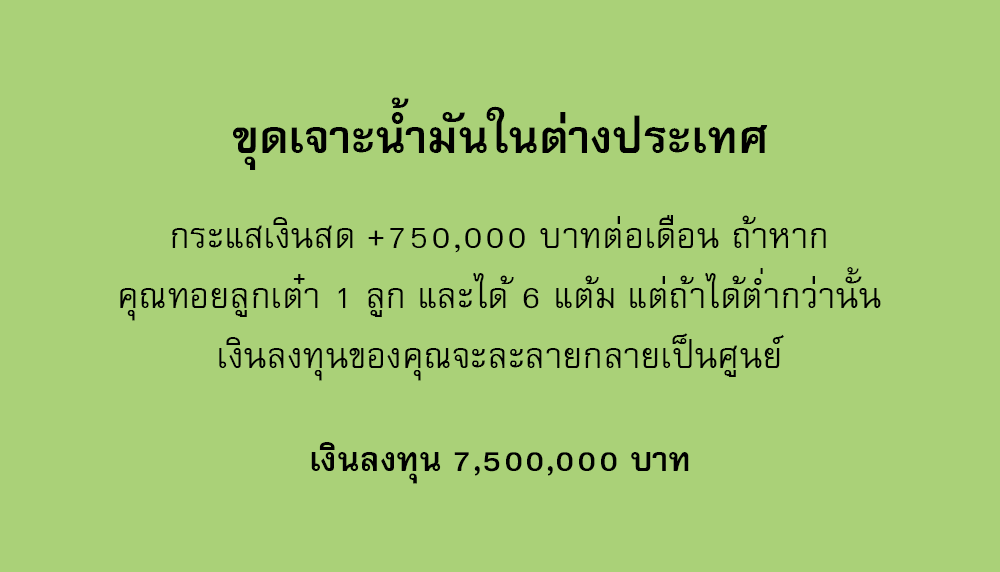
<style>
.page{position:relative;width:1000px;height:572px;background:#aad178}
.page>*{position:absolute;margin:0}
.t1{font:64px "FreesiaUPCBold";color:#000000}
.t2{font:50px/60px "FreesiaUPC";color:#000000}
.t3{font:47px "FreesiaUPCBold";color:#000000}
</style>
<div class="page">
<p class="t1" style="left:233px;top:97px;width:535px;height:73px">ขุดเจาะน้ำมันในต่างประเทศ</p>
<p class="t2" style="left:120px;top:215px;width:761px;height:166px;text-align:center">กระแสเงินสด +750,000 บาทต่อเดือน ถ้าหาก<br>คุณทอยลูกเต๋า 1 ลูก และได้ 6 แต้ม แต่ถ้าได้ต่ำกว่านั้น<br>เงินลงทุนของคุณจะละลายกลายเป็นศูนย์</p>
<p class="t3" style="left:311px;top:442px;width:378px;height:42px">เงินลงทุน 7,500,000 บาท</p>
</div>
